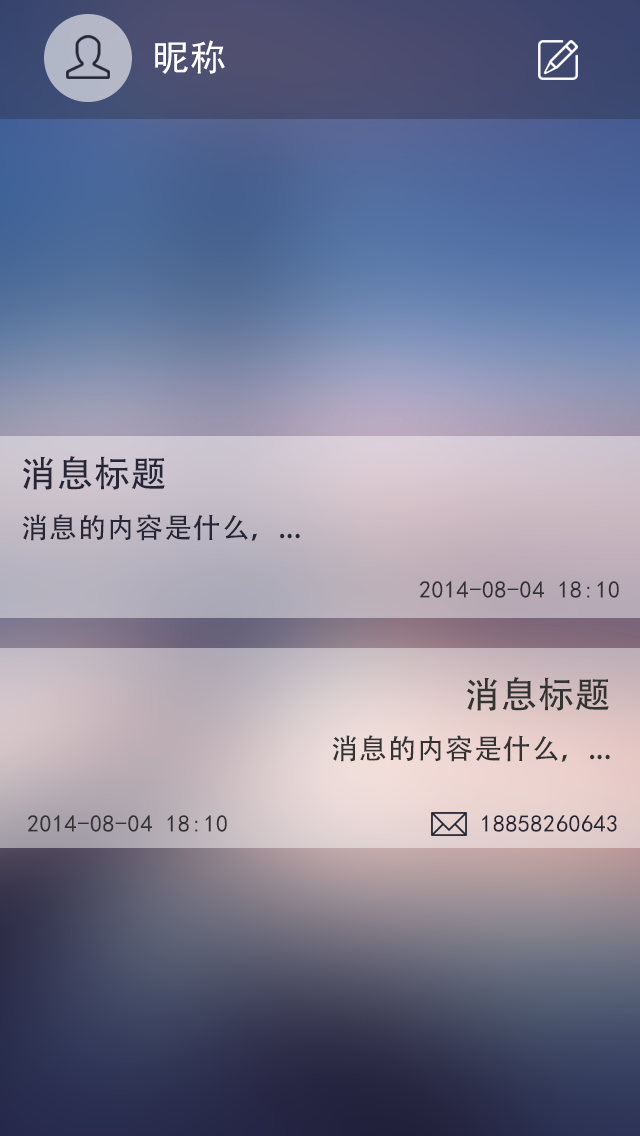
<style>
.page{position:relative;width:640px;height:1136px}
.page>*{position:absolute;margin:0}
.t1{font:36px "SimHei";letter-spacing:0.025em;color:#ffffff}
.t2{font:36px "AdobeHeitiStd-Regular";letter-spacing:0.025em;color:#272636}
.t3{font:28px "AdobeHeitiStd-Regular";letter-spacing:0.025em;color:#272636}
.t4{font:24px "SimHei";letter-spacing:0.025em;color:#333333}
.t5{font:36px "AdobeHeitiStd-Regular";letter-spacing:0.025em;color:#333333}
.t6{font:28px "AdobeHeitiStd-Regular";letter-spacing:0.025em;color:#333333}
.t7{font:24px "SimHei";letter-spacing:0.025em;color:#272636}
</style>
<div class="page">
<p class="t1" style="left:155px;top:40px;width:70px;height:34px">昵称</p>
<p class="t2" style="left:23px;top:456px;width:142px;height:34px">消息标题</p>
<p class="t3" style="left:22px;top:514px;width:278px;height:27px">消息的内容是什么，...</p>
<p class="t4" style="left:419px;top:581px;width:200px;height:17px">2014-08-04 18:10</p>
<p class="t5" style="left:467px;top:677px;width:142px;height:34px">消息标题</p>
<p class="t6" style="left:332px;top:735px;width:278px;height:27px">消息的内容是什么，...</p>
<p class="t4" style="left:27px;top:815px;width:200px;height:17px">2014-08-04 18:10</p>
<p class="t7" style="left:482px;top:815px;width:135px;height:17px">18858260643</p>
</div>
